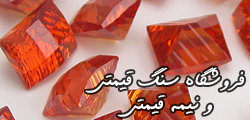
<style>
.page{position:relative;width:250px;height:120px}
.page>*{position:absolute;margin:0}
.t1{font:27px/24px "pHallsKhodkar";color:#ffffff}
</style>
<div class="page">
<p class="t1" style="left:85px;top:67px;width:159px;height:50px;text-align:center">فروشگاه سنگ قیمتی<br>و نیمه قیمتی</p>
</div>
